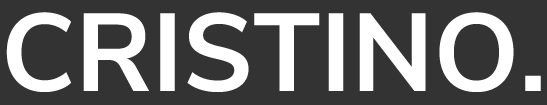
<style>
.page{position:relative;width:547px;height:105px;background:#333333}
.page>*{position:absolute;margin:0}
.t1{font:110px "NunitoSans-Bold";color:#ffffff}
</style>
<div class="page">
<p class="t1" style="left:6px;top:12px;width:535px;height:80px">CRISTINO.</p>
</div>
